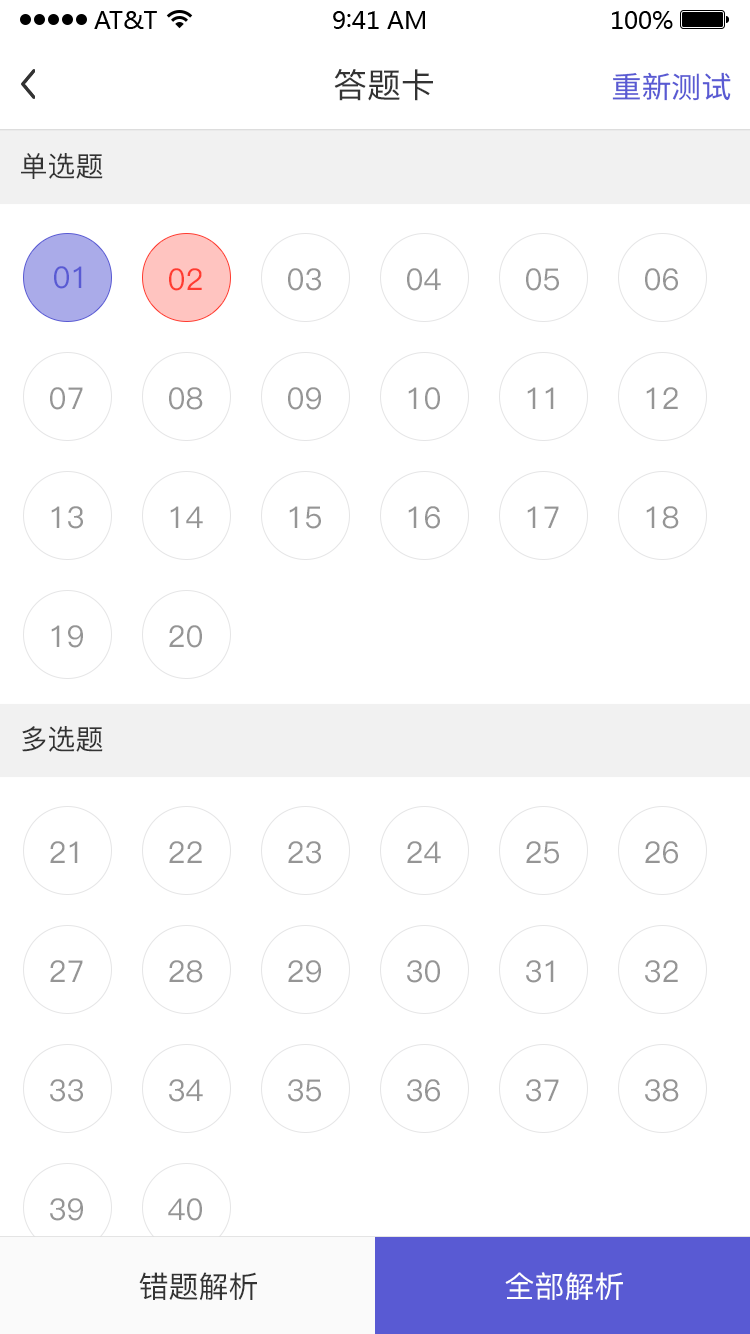
<style>
.page{position:relative;width:750px;height:1334px;background:#ffffff}
.page>*{position:absolute;margin:0}
.t1{font:34px "PingFang-SC-Medium";color:#333333}
.t2{font:30px "SourceHanSansCN-Regular";color:#595ad3}
.t3{font:28px "PingFang-SC-Medium";color:#333333}
.t4{font:30px "PingFang-SC-Medium";color:#595ad3}
.t5{font:30px "PingFang-SC-Medium";color:#ff3b30}
.t6{font:30px "PingFang-SC-Medium";color:#959595}
.t7{font:30px "PingFang-SC-Medium";color:#333333}
.t8{font:30px "PingFang-SC-Medium";color:#ffffff}
</style>
<div class="page">
<p class="t1" style="left:334px;top:69px;width:99px;height:32px">答题卡</p>
<p class="t2" style="left:612px;top:72px;width:119px;height:29px">重新测试</p>
<p class="t3" style="left:21px;top:153px;width:82px;height:26px">单选题</p>
<p class="t4" style="left:54px;top:266px;width:28px;height:23px">01</p>
<p class="t5" style="left:169px;top:268px;width:33px;height:23px">02</p>
<p class="t6" style="left:288px;top:268px;width:33px;height:23px">03</p>
<p class="t6" style="left:407px;top:268px;width:34px;height:23px">04</p>
<p class="t6" style="left:526px;top:268px;width:33px;height:23px">05</p>
<p class="t6" style="left:645px;top:268px;width:33px;height:23px">06</p>
<p class="t6" style="left:50px;top:387px;width:33px;height:23px">07</p>
<p class="t6" style="left:169px;top:387px;width:34px;height:23px">08</p>
<p class="t6" style="left:288px;top:387px;width:33px;height:23px">09</p>
<p class="t6" style="left:408px;top:387px;width:32px;height:23px">10</p>
<p class="t6" style="left:527px;top:387px;width:27px;height:22px">11</p>
<p class="t6" style="left:646px;top:387px;width:32px;height:22px">12</p>
<p class="t6" style="left:51px;top:506px;width:32px;height:23px">13</p>
<p class="t6" style="left:170px;top:506px;width:33px;height:22px">14</p>
<p class="t6" style="left:289px;top:506px;width:32px;height:23px">15</p>
<p class="t6" style="left:408px;top:506px;width:32px;height:23px">16</p>
<p class="t6" style="left:527px;top:506px;width:32px;height:22px">17</p>
<p class="t6" style="left:646px;top:506px;width:33px;height:23px">18</p>
<p class="t6" style="left:51px;top:625px;width:32px;height:23px">19</p>
<p class="t6" style="left:169px;top:625px;width:33px;height:23px">20</p>
<p class="t3" style="left:22px;top:726px;width:81px;height:26px">多选题</p>
<p class="t6" style="left:50px;top:841px;width:28px;height:22px">21</p>
<p class="t6" style="left:169px;top:841px;width:33px;height:22px">22</p>
<p class="t6" style="left:288px;top:841px;width:33px;height:23px">23</p>
<p class="t6" style="left:407px;top:841px;width:34px;height:22px">24</p>
<p class="t6" style="left:526px;top:841px;width:33px;height:23px">25</p>
<p class="t6" style="left:645px;top:841px;width:33px;height:23px">26</p>
<p class="t6" style="left:50px;top:960px;width:33px;height:22px">27</p>
<p class="t6" style="left:169px;top:960px;width:34px;height:23px">28</p>
<p class="t6" style="left:288px;top:960px;width:33px;height:23px">29</p>
<p class="t6" style="left:407px;top:960px;width:33px;height:23px">30</p>
<p class="t6" style="left:526px;top:960px;width:28px;height:23px">31</p>
<p class="t6" style="left:645px;top:960px;width:33px;height:23px">32</p>
<p class="t6" style="left:50px;top:1079px;width:33px;height:23px">33</p>
<p class="t6" style="left:169px;top:1079px;width:34px;height:23px">34</p>
<p class="t6" style="left:288px;top:1079px;width:33px;height:23px">35</p>
<p class="t6" style="left:407px;top:1079px;width:33px;height:23px">36</p>
<p class="t6" style="left:526px;top:1079px;width:33px;height:23px">37</p>
<p class="t6" style="left:645px;top:1079px;width:34px;height:23px">38</p>
<p class="t6" style="left:50px;top:1198px;width:33px;height:23px">39</p>
<p class="t6" style="left:168px;top:1198px;width:34px;height:23px">40</p>
<p class="t7" style="left:139px;top:1272px;width:118px;height:29px">错题解析</p>
<p class="t8" style="left:505px;top:1272px;width:118px;height:29px">全部解析</p>
</div>
